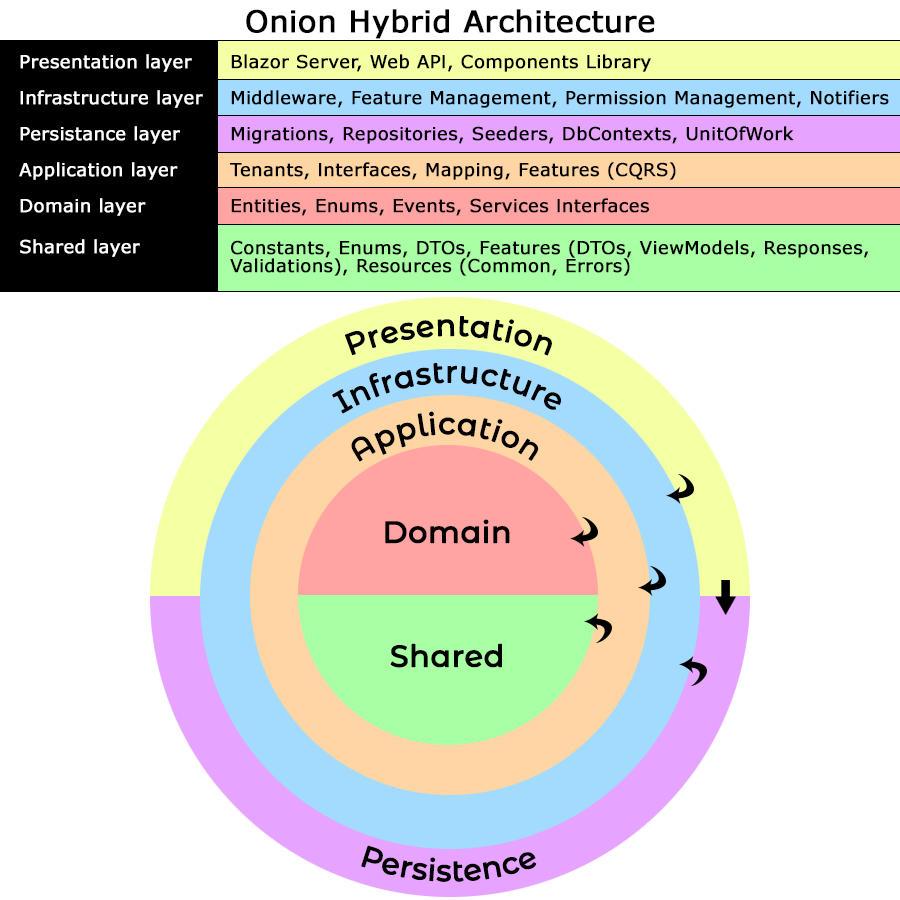
<style>
.page{position:relative;width:900px;height:900px;background:#ffffff}
.page>*{position:absolute;margin:0}
.t1{font:30px "Verdana";color:#000000;font-weight:bold}
.t2{font:18px/36px "Verdana";color:#ffffff;font-weight:bold}
.t3{font:18px/41px "Verdana";color:#ffffff;font-weight:bold}
.t4{font:18px/36px "Verdana";color:#000000;font-weight:bold}
.t5{font:18px/18px "Verdana";color:#000000;font-weight:bold}
.t6{font:30px "Montserrat-Medium";color:#000000;font-weight:bold}
</style>
<div class="page">
<p class="t1" style="left:246px;top:9px;width:409px;height:30px">Onion Hybrid Architecture</p>
<p class="t2" style="left:19px;top:54px;width:184px;height:203px">Presentation layer<br>Infrastructure layer<br>Persistance layer<br>Application layer<br>Domain layer<br><span class="t3">Shared layer</span></p>
<p class="t4" style="left:230px;top:54px;width:659px;height:222px">Blazor Server, Web API, Components Library<br>Middleware, Feature Management, Permission Management, Notifiers<br>Migrations, Repositories, Seeders, DbContexts, UnitOfWork<br>Tenants, Interfaces, Mapping, Features (CQRS)<br>Entities, Enums, Events, Services Interfaces<br><br><span class="t5">Constants, Enums, DTOs, Features (DTOs, ViewModels, Responses, Validations), Resources (Common, Errors)</span></p>
<p class="t6" style="left:344px;top:316px;width:208px;height:40px">Presentation</p>
<p class="t6" style="left:332px;top:363px;width:229px;height:51px">Infrastructure</p>
<p class="t6" style="left:351px;top:411px;width:188px;height:51px">Application</p>
<p class="t6" style="left:385px;top:519px;width:125px;height:25px">Domain</p>
<p class="t6" style="left:390px;top:643px;width:112px;height:25px">Shared</p>
<p class="t6" style="left:361px;top:845px;width:176px;height:37px">Persistence</p>
</div>
